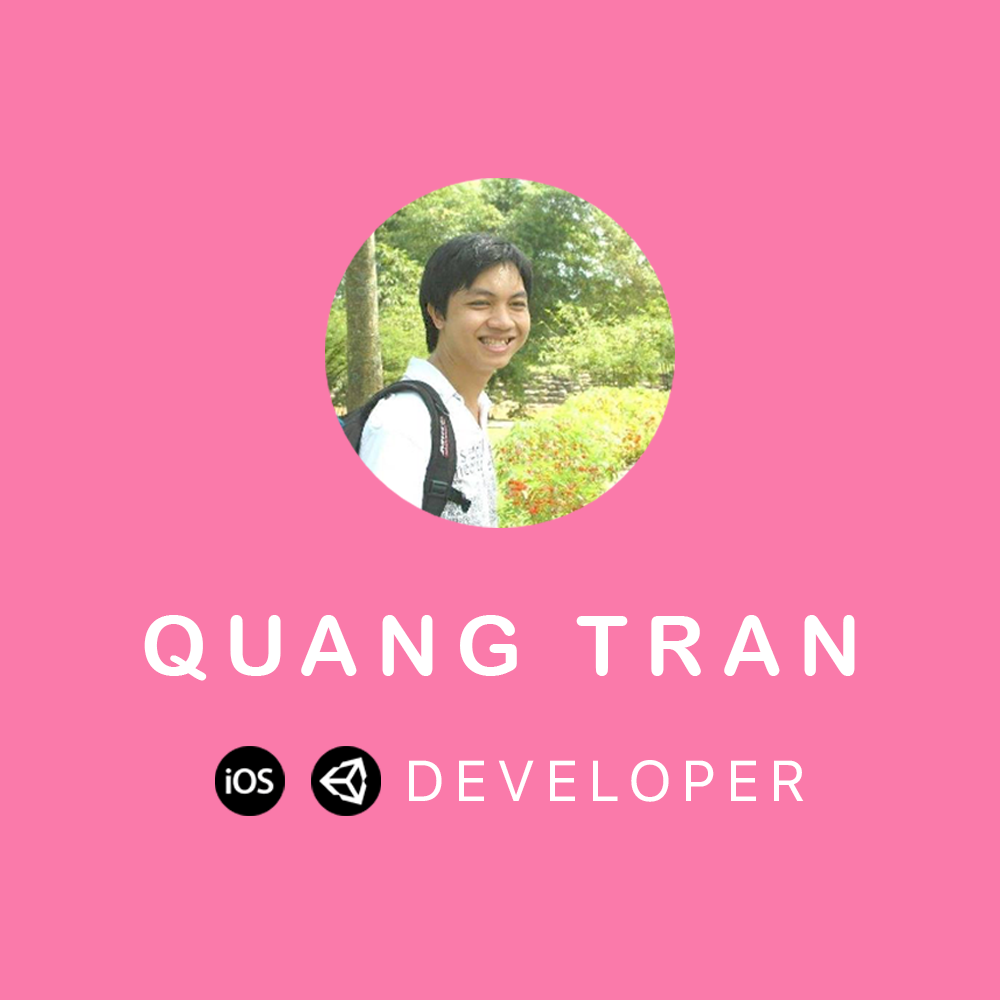
<style>
.page{position:relative;width:1000px;height:1000px;background:#fa7aaa}
.page>*{position:absolute;margin:0}
.t1{font:83.3px "ArialRoundedMTBold";letter-spacing:0.2em;color:#ffffff;text-transform:uppercase}
.t2{font:57.3px "SFProDisplay-Regular";letter-spacing:0.2em;color:#ffffff;text-transform:uppercase}
</style>
<div class="page">
<p class="t1" style="left:144px;top:615px;width:711px;height:66px">Quang Tran</p>
<p class="t2" style="left:409px;top:760px;width:395px;height:42px">Developer</p>
</div>
